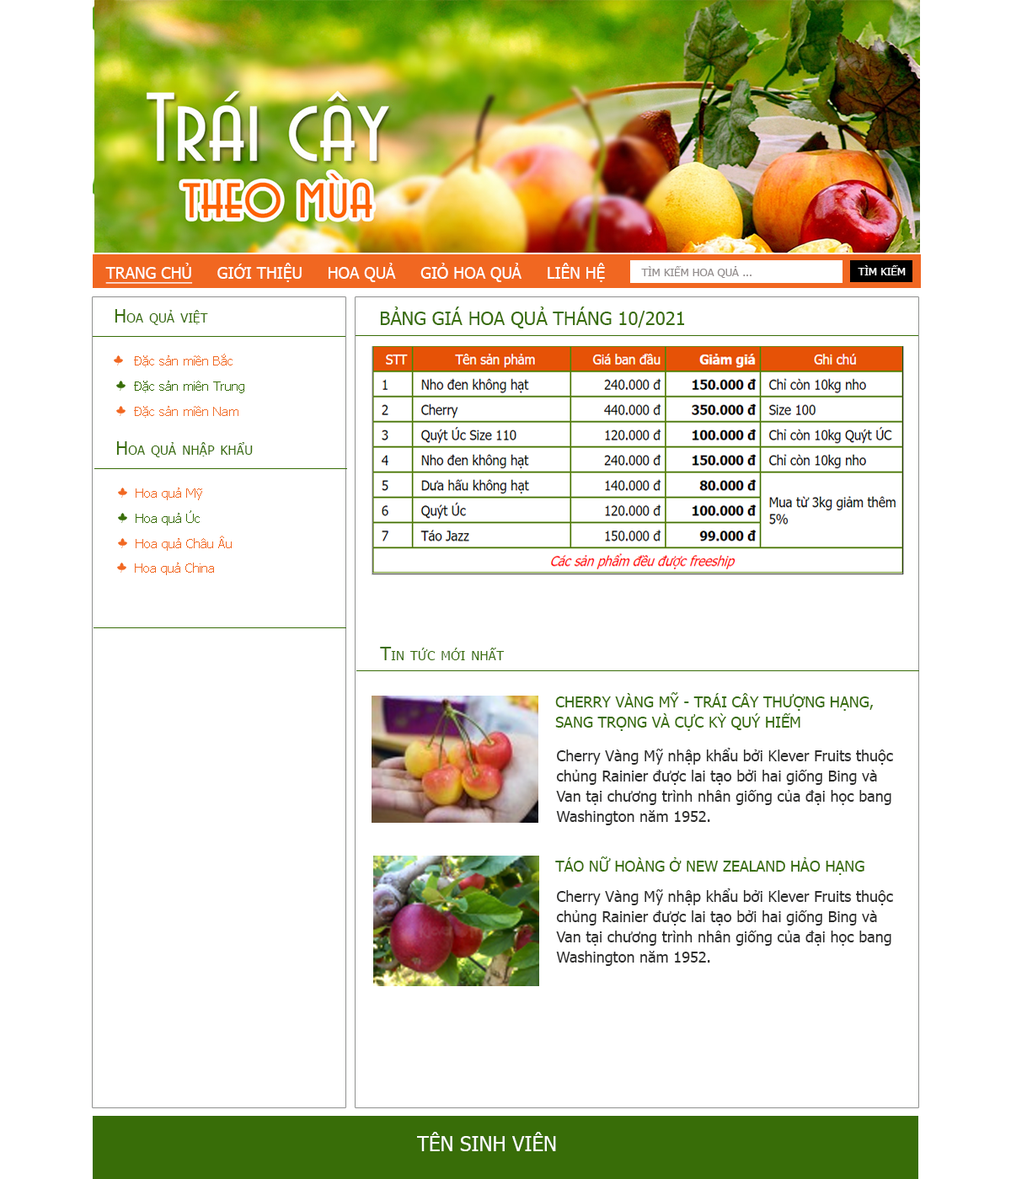
<style>
.page{position:relative;width:1011px;height:1179px;background:#ffffff}
.page>*{position:absolute;margin:0}
.t1{font:16px "Tahoma";color:#ffffff}
.t2{font:16px "Tahoma";color:#ffffff;text-decoration:underline}
.t3{font:11px "Tahoma";color:#938d8d}
.t4{font:11px "Tahoma";color:#ffffff}
.t5{font:18.5px "Tahoma";color:#386d08;font-variant:small-caps}
.t6{font:12.6px "Tahoma";color:#f16721}
.t7{font:12.6px "Tahoma";color:#386d08}
.t8{font:12.6px "Tahoma";color:#f16e2b}
.t9{font:15.2px/20.2px "Tahoma";color:#386d08;font-variant:small-caps}
.t10{font:15.2px/20.2px "Tahoma";color:#2e2e2d}
.t11{font:15.2px "Tahoma";color:#386d08;font-variant:small-caps}
.t12{font:20.2px "Tahoma";color:#ffffff}
</style>
<div class="page">
<p class="t1" style="left:105px;top:263px;width:500px;height:21px"><span class="t2">TRANG CHỦ</span>     GIỚI THIỆU     HOA QUẢ     GIỎ HOA QUẢ     LIÊN HỆ</p>
<p class="t3" style="left:641px;top:266px;width:110px;height:12px">TÌM KIẾM HOA QUẢ ...</p>
<p class="t4" style="left:858px;top:265px;width:48px;height:10px">TÌM KIẾM</p>
<p class="t5" style="left:115px;top:309px;width:93px;height:16px">Hoa quả việt</p>
<p class="t5" style="left:380px;top:307px;width:305px;height:22px">BẢNG GIÁ HOA QUẢ THÁNG 10/2021</p>
<p class="t6" style="left:134px;top:354px;width:99px;height:13px">Đặc sản miền Bắc</p>
<p class="t7" style="left:134px;top:381px;width:110px;height:12px">Đặc sản miên Trung</p>
<p class="t8" style="left:134px;top:406px;width:104px;height:12px">Đặc sản miền Nam</p>
<p class="t5" style="left:116px;top:441px;width:137px;height:16px">Hoa quả nhập khẩu</p>
<p class="t6" style="left:136px;top:488px;width:66px;height:12px">Hoa quả Mỹ</p>
<p class="t7" style="left:136px;top:511px;width:64px;height:15px">Hoa quả Úc</p>
<p class="t6" style="left:136px;top:536px;width:96px;height:15px">Hoa quả Châu Âu</p>
<p class="t6" style="left:135px;top:563px;width:79px;height:12px">Hoa quả China</p>
<p class="t5" style="left:380px;top:647px;width:125px;height:14px">Tin tức mới nhất</p>
<p class="t9" style="left:555px;top:693px;width:318px;height:38px">CHERRY VÀNG MỸ - TRÁI CÂY THƯỢNG HẠNG, <br>SANG TRỌNG VÀ CỰC KỲ QUÝ HIẾM</p>
<p class="t10" style="left:556px;top:748px;width:337px;height:78px">Cherry Vàng Mỹ nhập khẩu bởi Klever Fruits thuộc <br>chủng Rainier được lai tạo bởi hai giống Bing và <br>Van tại chương trình nhân giống của đại học bang <br>Washington năm 1952.</p>
<p class="t11" style="left:555px;top:857px;width:309px;height:18px">TÁO NỮ HOÀNG Ở NEW ZEALAND HẢO HẠNG</p>
<p class="t10" style="left:556px;top:889px;width:337px;height:77px">Cherry Vàng Mỹ nhập khẩu bởi Klever Fruits thuộc <br>chủng Rainier được lai tạo bởi hai giống Bing và <br>Van tại chương trình nhân giống của đại học bang <br>Washington năm 1952.</p>
<p class="t12" style="left:417px;top:1132px;width:139px;height:20px">TÊN SINH VIÊN</p>
</div>
